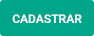
<style>
.page{position:relative;width:94px;height:36px;background:#00a68a}
.page>*{position:absolute;margin:0}
.t1{font:12px "Roboto-Bold";color:#ffffff;text-transform:uppercase}
</style>
<div class="page">
<p class="t1" style="left:12px;top:14px;width:70px;height:9px">CADASTRAR</p>
</div>
